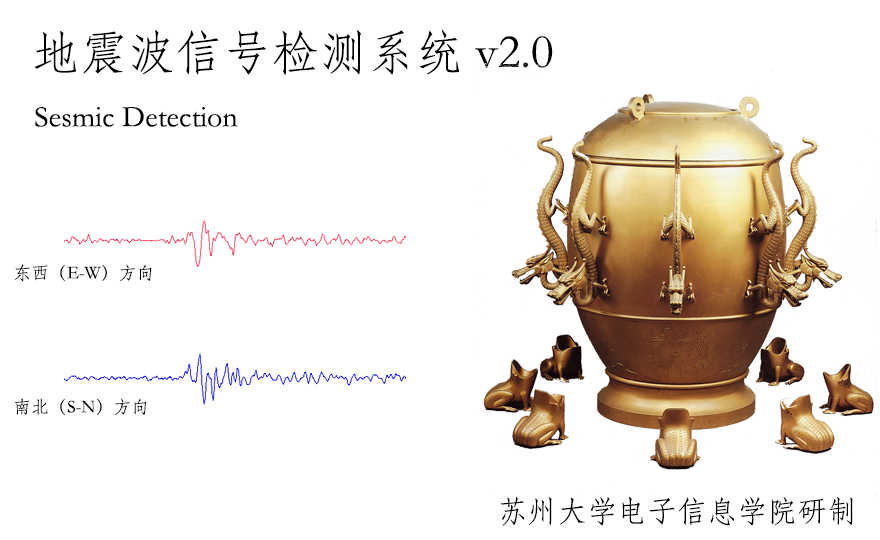
<style>
.page{position:relative;width:880px;height:540px;background:#ffffff}
.page>*{position:absolute;margin:0}
.t1{font:48px "STFangsong";color:#000000}
.t2{font:30px "STFangsong";color:#000000}
.t3{font:18px "STFangsong";color:#000000}
</style>
<div class="page">
<p class="t1" style="left:34px;top:29px;width:519px;height:46px">地震波信号检测系统 v2.0</p>
<p class="t2" style="left:35px;top:107px;width:203px;height:20px">Sesmic Detection</p>
<p class="t3" style="left:14px;top:264px;width:138px;height:18px">东西（E-W）方向</p>
<p class="t3" style="left:15px;top:398px;width:132px;height:18px">南北（S-N）方向</p>
<p class="t2" style="left:500px;top:496px;width:353px;height:30px">苏州大学电子信息学院研制</p>
</div>
